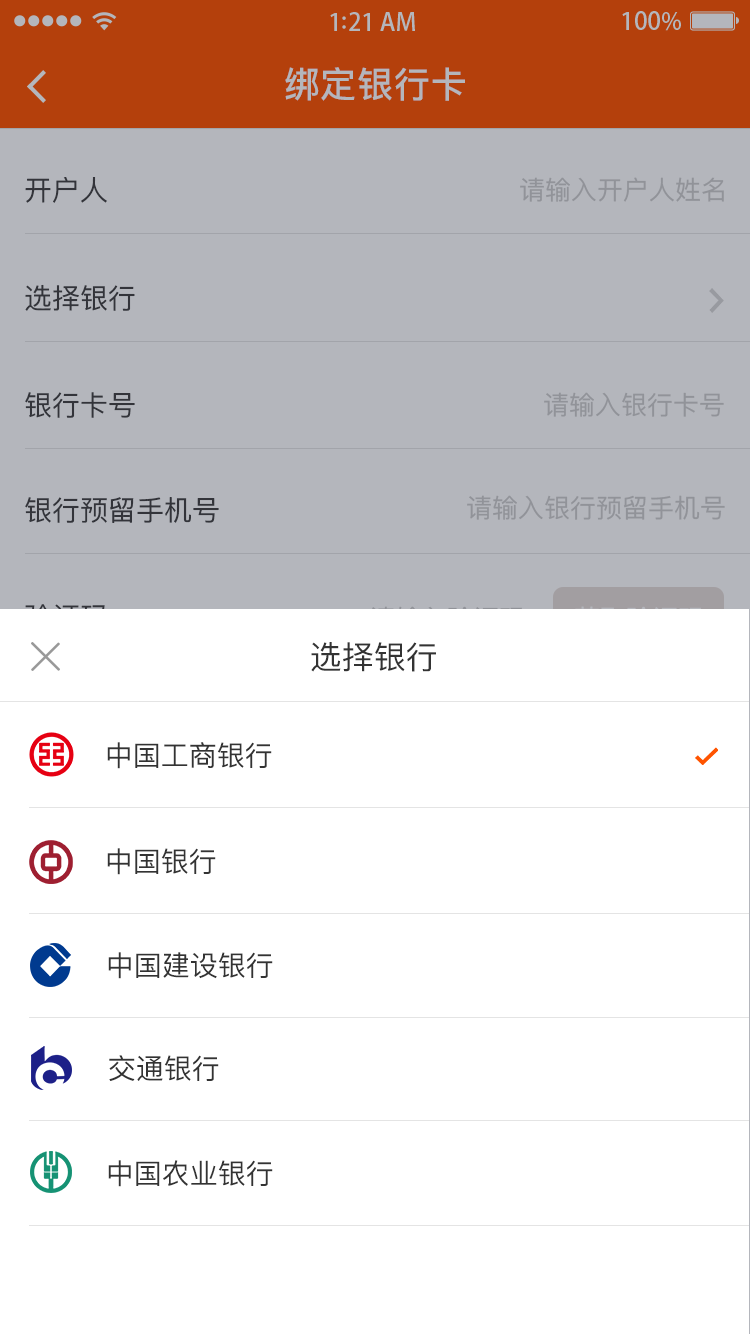
<style>
.page{position:relative;width:750px;height:1334px;background:#ffffff}
.page>*{position:absolute;margin:0}
.t1{font:36px "PingFangSC-Medium";letter-spacing:0.02em;color:#b4b6bc}
.t2{font:28px "PingFangSC-Regular";color:#434343}
.t3{font:26px "PingFangSC-Regular";color:#919399}
.t4{font:32px "PingFangSC-Regular";color:#333333}
.t5{font:28px "PingFangSC-Regular";color:#333333}
</style>
<div class="page">
<p class="t1" style="left:285px;top:67px;width:180px;height:34px">绑定银行卡</p>
<p class="t2" style="left:25px;top:177px;width:82px;height:26px">开户人</p>
<p class="t3" style="left:520px;top:177px;width:204px;height:25px">请输入开户人姓名</p>
<p class="t2" style="left:25px;top:284px;width:110px;height:27px">选择银行</p>
<p class="t2" style="left:25px;top:392px;width:110px;height:26px">银行卡号</p>
<p class="t3" style="left:544px;top:392px;width:180px;height:25px">请输入银行卡号</p>
<p class="t2" style="left:25px;top:497px;width:194px;height:26px">银行预留手机号</p>
<p class="t3" style="left:467px;top:495px;width:258px;height:25px">请输入银行预留手机号</p>
<p class="t4" style="left:311px;top:642px;width:125px;height:30px">选择银行</p>
<p class="t5" style="left:107px;top:742px;width:165px;height:27px">中国工商银行</p>
<p class="t5" style="left:107px;top:848px;width:109px;height:27px">中国银行</p>
<p class="t5" style="left:108px;top:952px;width:165px;height:27px">中国建设银行</p>
<p class="t5" style="left:109px;top:1055px;width:110px;height:26px">交通银行</p>
<p class="t5" style="left:108px;top:1160px;width:165px;height:27px">中国农业银行</p>
</div>
